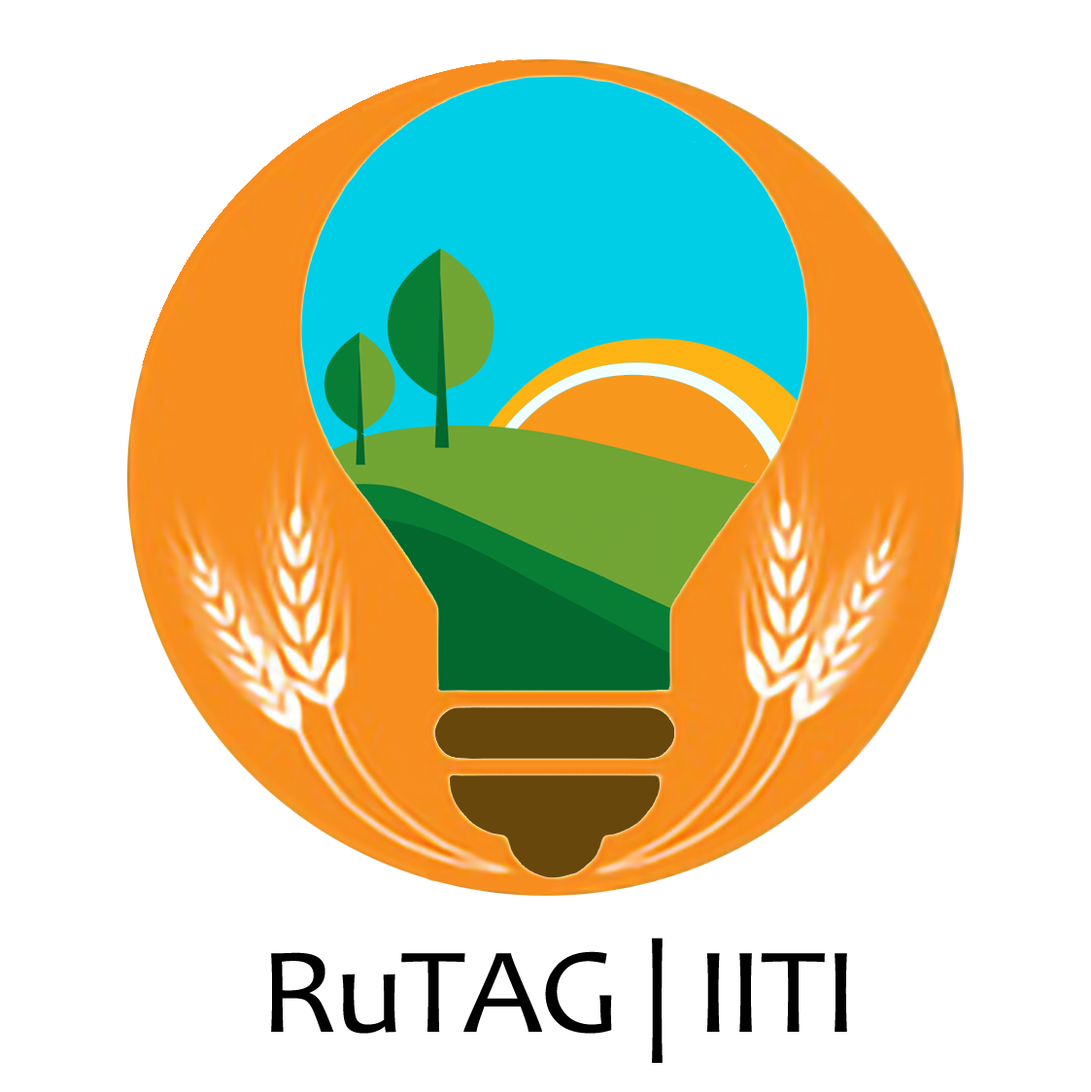
<style>
.page{position:relative;width:1091px;height:1092px;background:#ffffff}
.page>*{position:absolute;margin:0}
.t1{font:123.2px "Candara";letter-spacing:-0.025em;color:#000000;scale:1.05 1}
</style>
<div class="page">
<p class="t1" style="left:271px;top:938px;width:577px;height:125px">RuTAG | IITI</p>
</div>
